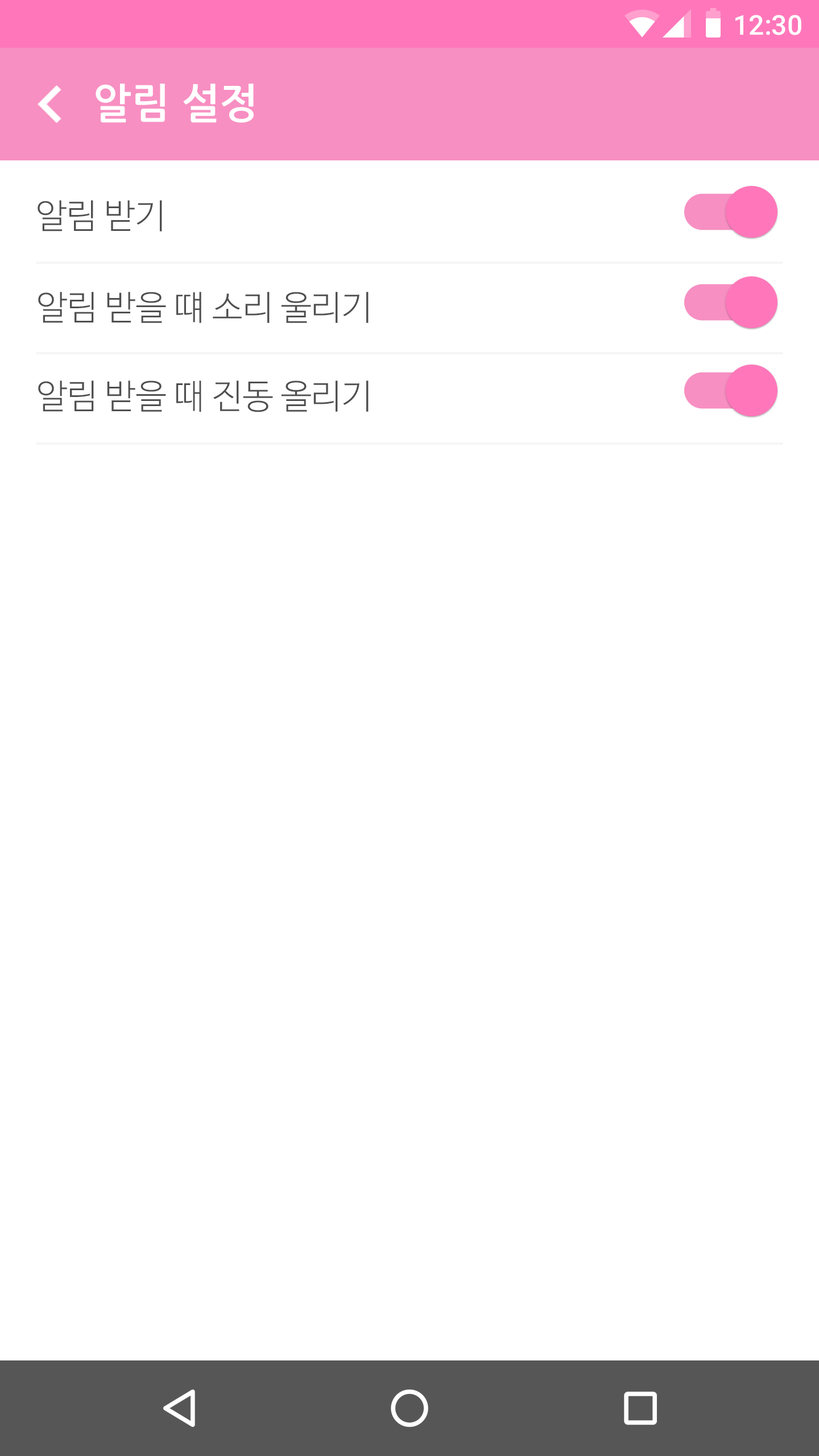
<style>
.page{position:relative;width:819px;height:1456px;background:#ffffff}
.page>*{position:absolute;margin:0}
.t1{font:27.3px "Roboto-Medium";color:#ffffff}
.t2{font:40.9px "NanumGothicBold";color:#ffffff}
.t3{font:34.2px "NanumBarunGothicLight";color:#4f4f4f}
</style>
<div class="page">
<p class="t1" style="left:735px;top:15px;width:66px;height:20px">12:30</p>
<p class="t2" style="left:96px;top:84px;width:158px;height:39px">알림 설정</p>
<p class="t3" style="left:38px;top:200px;width:124px;height:31px">알림 받기</p>
<p class="t3" style="left:38px;top:292px;width:331px;height:31px">알림 받을 떄 소리 울리기</p>
<p class="t3" style="left:38px;top:380px;width:331px;height:32px">알림 받을 때 진동 올리기</p>
</div>
